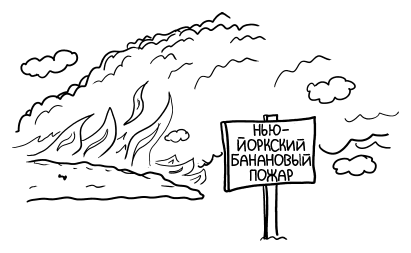
<style>
.page{position:relative;width:411px;height:253px;background:#ffffff}
.page>*{position:absolute;margin:0}
.t1{font:16.7px/15.3px "SarcasmInk";color:#000000}
</style>
<div class="page">
<p class="t1" style="left:231px;top:123px;width:81px;height:59px;text-align:center">Нью-<br>Йоркский Банановый Пожар</p>
</div>
